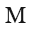
<style>
.page{position:relative;width:30px;height:30px;background:#ffffff}
.page>*{position:absolute;margin:0}
.t1{font:24px "BaskOldFace";color:#161616}
</style>
<div class="page">
<p class="t1" style="left:5px;top:7px;width:21px;height:16px">M</p>
</div>
